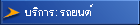
<style>
.page{position:relative;width:140px;height:25px}
.page>*{position:absolute;margin:0}
.t1{font:15.3px "EucrosiaDSE";color:#ffffff;scale:1.12 1}
</style>
<div class="page">
<p class="t1" style="left:25px;top:4px;width:68px;height:12px">ºÃÔ¡ÒÃ:Ã¶Â¹µì</p>
</div>
